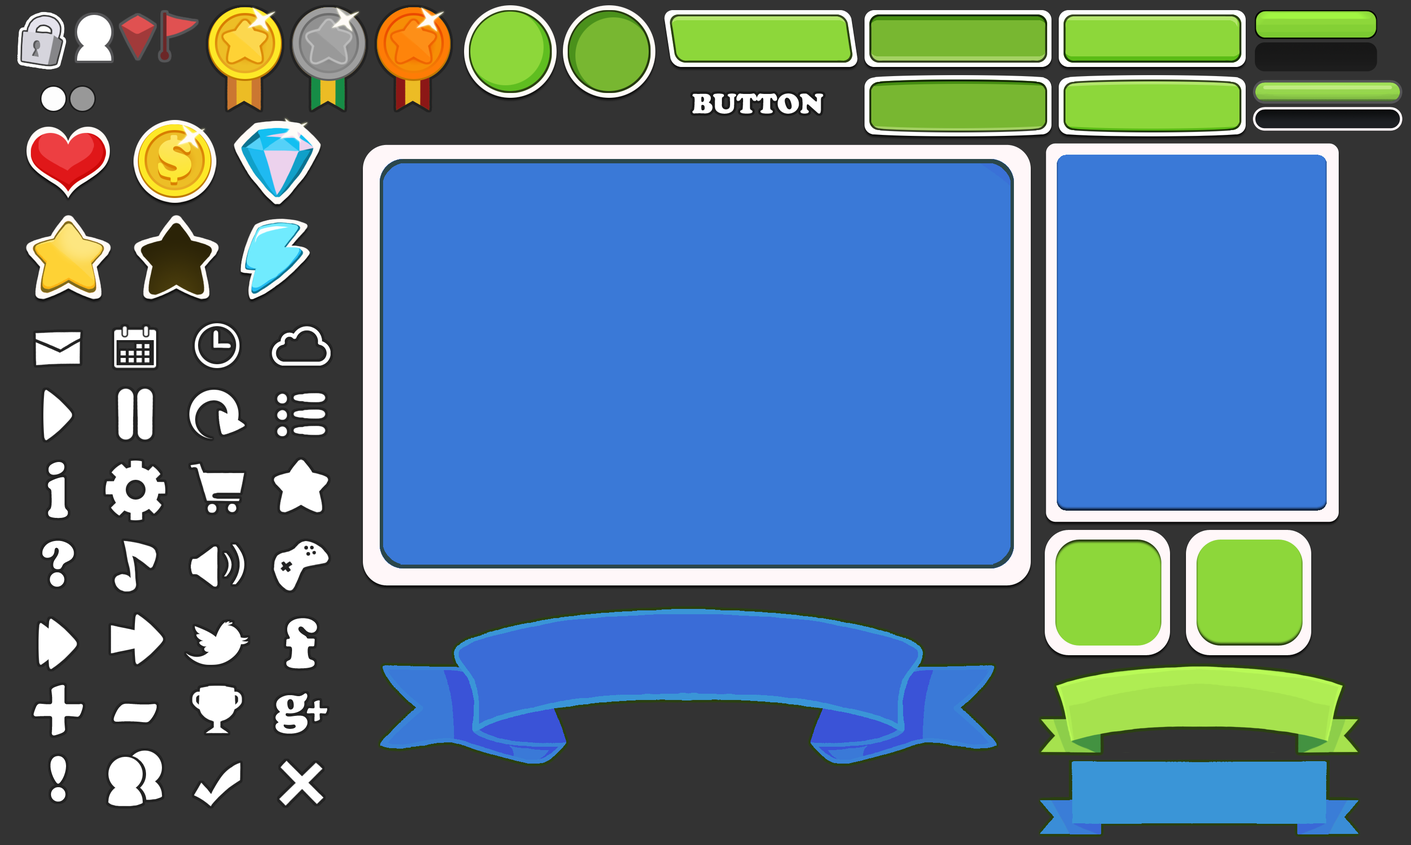
<style>
.page{position:relative;width:1411px;height:845px;background:#333333}
.page>*{position:absolute;margin:0}
.t1{font:28.9px "CooperBlack";color:#ffffff}
.t2{font:82.6px "CooperBlack";color:#ffffff;scale:0.71 1}
.t3{font:67.5px "CooperBlack";color:#ffffff}
.t4{font:73.4px "CooperBlack";letter-spacing:0.025em;color:#ffffff}
.t5{font:102.2px "CooperBlack";letter-spacing:0.025em;color:#ffffff}
.t6{font:102.2px "CooperBlack";letter-spacing:0.025em;color:#ffffff;scale:1.47 1}
</style>
<div class="page">
<p class="t1" style="left:692px;top:93px;width:131px;height:21px">BUTTON</p>
<p class="t2" style="left:48px;top:462px;width:20px;height:56px">i</p>
<p class="t3" style="left:42px;top:541px;width:32px;height:46px">?</p>
<p class="t4" style="left:286px;top:618px;width:31px;height:51px">f</p>
<p class="t5" style="left:33px;top:685px;width:50px;height:51px">+</p>
<p class="t6" style="left:114px;top:704px;width:43px;height:19px">-</p>
<p class="t3" style="left:50px;top:756px;width:16px;height:46px">!</p>
</div>
